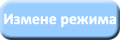
<style>
.page{position:relative;width:120px;height:40px;background:#99ccff}
.page>*{position:absolute;margin:0}
.t1{font:16px "Calibri-Bold";color:#ffffff}
</style>
<div class="page">
<p class="t1" style="left:4px;top:13px;width:112px;height:14px">Измене режима</p>
</div>
